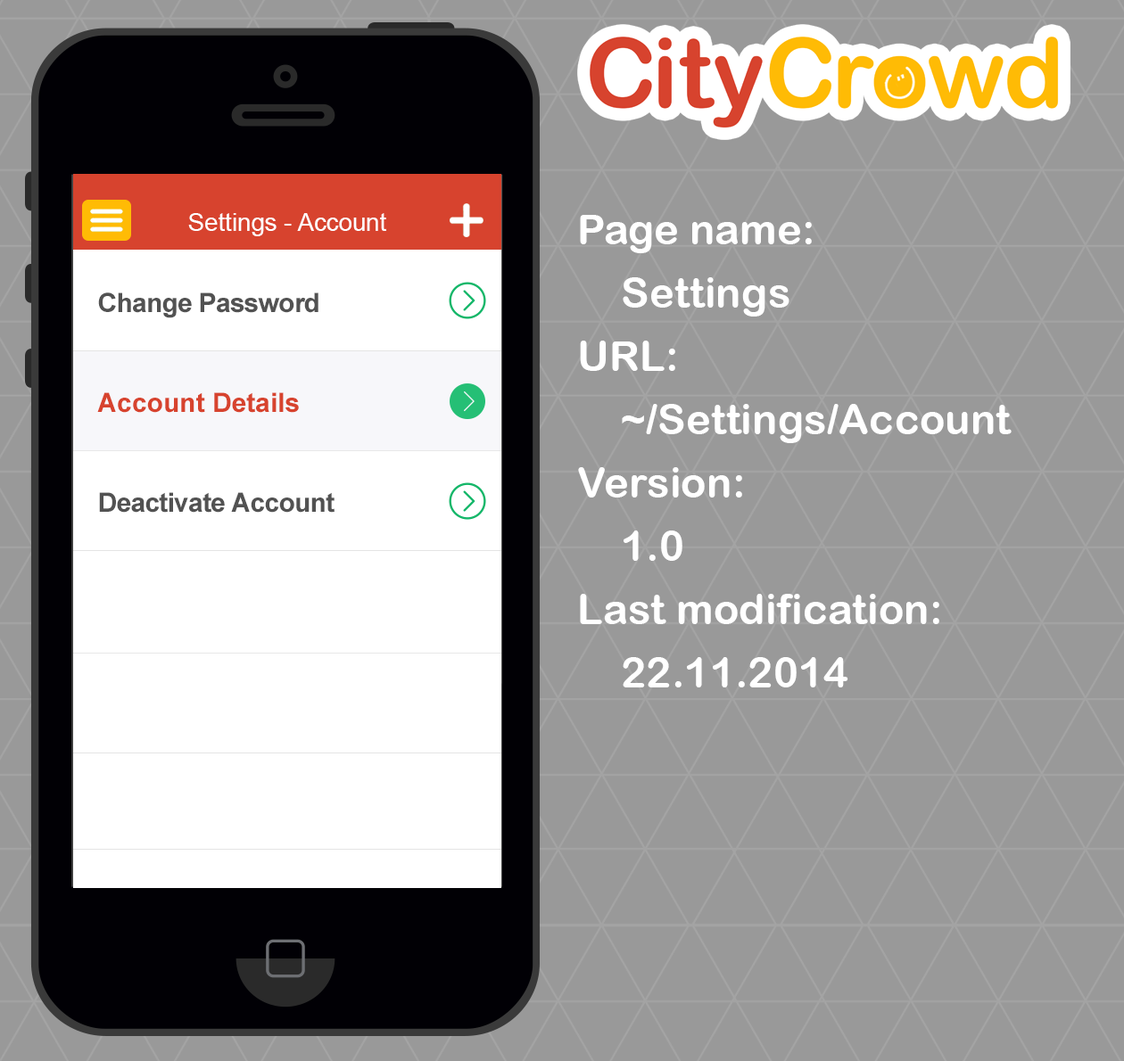
<style>
.page{position:relative;width:1124px;height:1061px;background:#999999}
.page>*{position:absolute;margin:0}
.t1{font:24.6px "ArialMT";color:#ffffff}
.t2{font:42.2px/63.3px "ArialRoundedMTBold";color:#ffffff}
.t3{font:26.8px/99.9px "Arial-BoldMT";letter-spacing:-0.025em;color:#525252}
.t4{font:26.8px/99.9px "Arial-BoldMT";color:#d7432e}
</style>
<div class="page">
<p class="t1" style="left:188px;top:213px;width:198px;height:23px">Settings - Account</p>
<p class="t2" style="left:578px;top:215px;width:433px;height:473px">Page name:<br>Settings<br>URL:<br>~/Settings/Account<br>Version:<br>1.0<br>Last modification:<br>22.11.2014</p>
<p class="t3" style="left:97px;top:293px;width:237px;height:220px">Change Password<br><span class="t4">Account Details<br></span>Deactivate Account</p>
</div>
